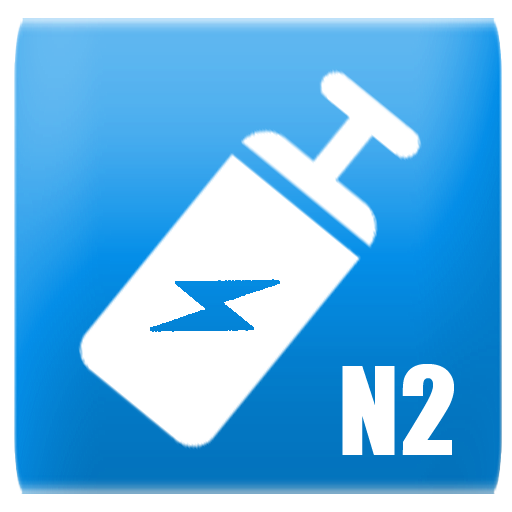
<style>
.page{position:relative;width:512px;height:512px;background:#ffffff}
.page>*{position:absolute;margin:0}
.t1{font:112.7px "Impact";letter-spacing:0.012em;color:#ffffff}
</style>
<div class="page">
<p class="t1" style="left:342px;top:364px;width:112px;height:91px">N2</p>
</div>
